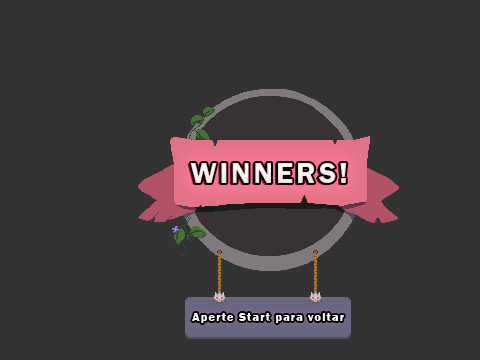
<style>
.page{position:relative;width:480px;height:360px;background:#333333}
.page>*{position:absolute;margin:0}
.t1{font:30px "FranklinGothic-Demi";letter-spacing:0.1em;color:#ffffff}
.t2{font:12px "FranklinGothic-Demi";letter-spacing:0.1em;color:#ffffff}
</style>
<div class="page">
<p class="t1" style="left:190px;top:163px;width:157px;height:20px">WINNERS!</p>
<p class="t2" style="left:192px;top:313px;width:152px;height:10px">Aperte Start para voltar</p>
</div>
